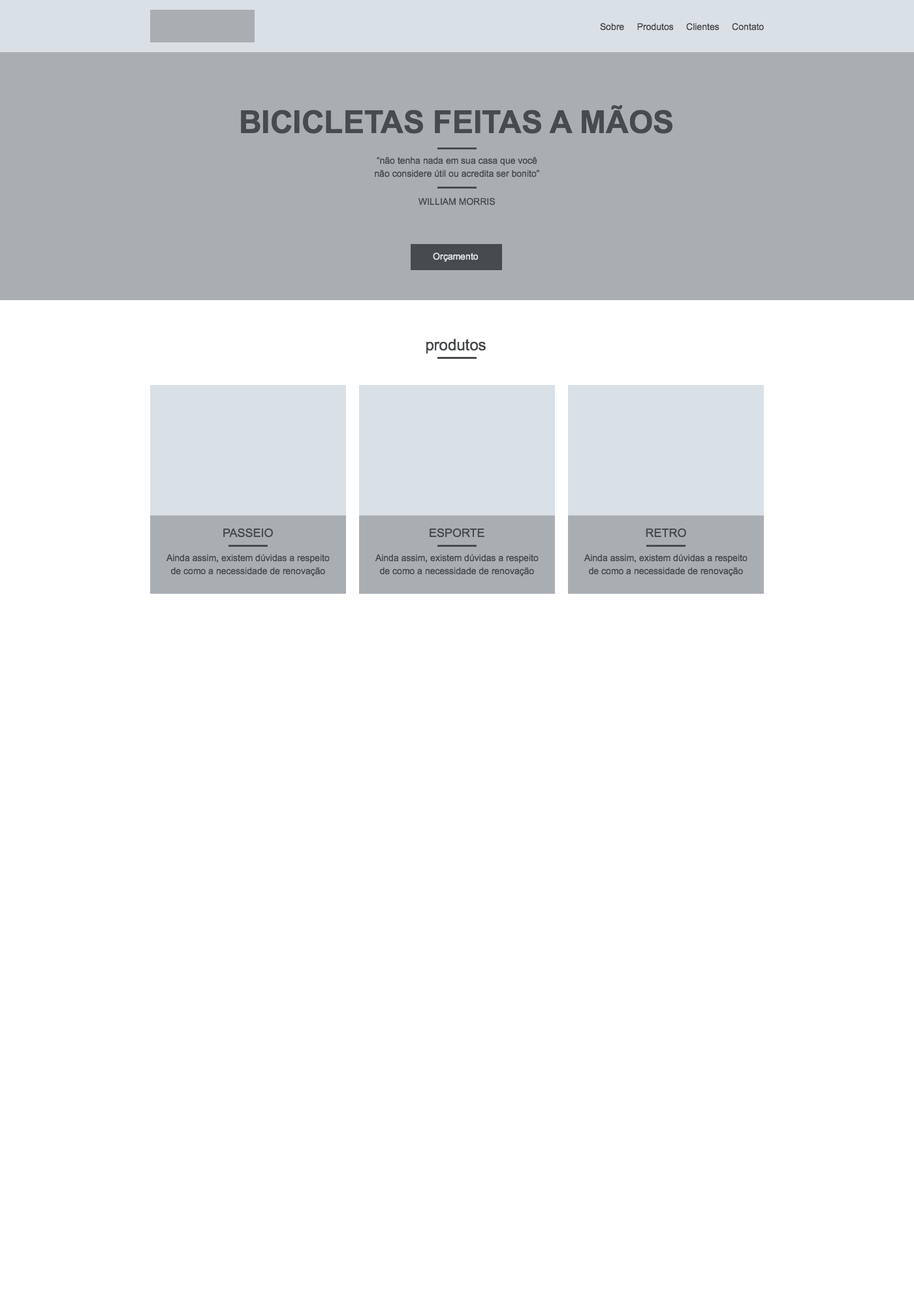
<style>
.page{position:relative;width:914px;height:1305px;background:#ffffff}
.page>*{position:absolute;margin:0}
.t1{font:9.1px "ArialMT";color:#484b4d}
.t2{font:31.3px "Arial-BoldMT";color:#484b4d;text-transform:uppercase}
.t3{font:9.1px/13.1px "ArialMT";color:#484b4d}
.t4{font:9.1px "ArialMT";color:#d9e0e6}
.t5{font:15.7px "ArialMT";color:#484b4d}
.t6{font:11.7px "ArialMT";color:#484b4d}
</style>
<div class="page">
<p class="t1" style="left:600px;top:23px;width:164px;height:8px">Sobre     Produtos     Clientes     Contato</p>
<p class="t2" style="left:241px;top:105px;width:431px;height:29px">Bicicletas Feitas a Mãos</p>
<p class="t3" style="left:375px;top:157px;width:164px;height:21px;text-align:center">“não tenha nada em sua casa que você<br>não considere útil ou acredita ser bonito”</p>
<p class="t1" style="left:418px;top:198px;width:77px;height:8px">WILLIAM MORRIS</p>
<p class="t4" style="left:433px;top:253px;width:45px;height:9px">Orçamento</p>
<p class="t5" style="left:425px;top:339px;width:61px;height:15px">produtos</p>
<p class="t6" style="left:223px;top:528px;width:50px;height:10px">PASSEIO</p>
<p class="t6" style="left:429px;top:528px;width:55px;height:10px">ESPORTE</p>
<p class="t6" style="left:645px;top:528px;width:41px;height:10px">RETRO</p>
<p class="t3" style="left:166px;top:554px;width:164px;height:22px;text-align:center">Ainda assim, existem dúvidas a respeito de como a necessidade de renovação</p>
<p class="t3" style="left:375px;top:554px;width:163px;height:22px;text-align:center">Ainda assim, existem dúvidas a respeito de como a necessidade de renovação</p>
<p class="t3" style="left:583px;top:554px;width:164px;height:22px;text-align:center">Ainda assim, existem dúvidas a respeito de como a necessidade de renovação</p>
</div>
